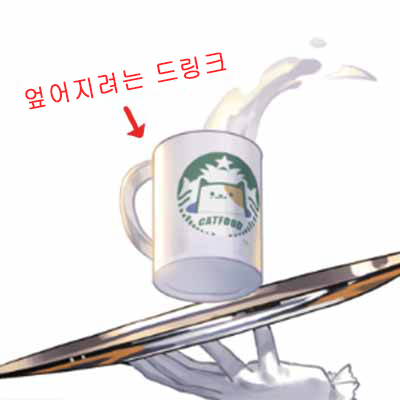
<style>
.page{position:relative;width:400px;height:400px;background:#fefefe}
.page>*{position:absolute;margin:0}
.t1{font:25.1px "Gulim";letter-spacing:0.04em;color:#ff2227;font-weight:bold;scale:0.93 1}
</style>
<div class="page">
<p class="t1" style="left:25px;top:52px;width:202px;height:58px;rotate:-11deg">엎어지려는 드링크</p>
</div>
